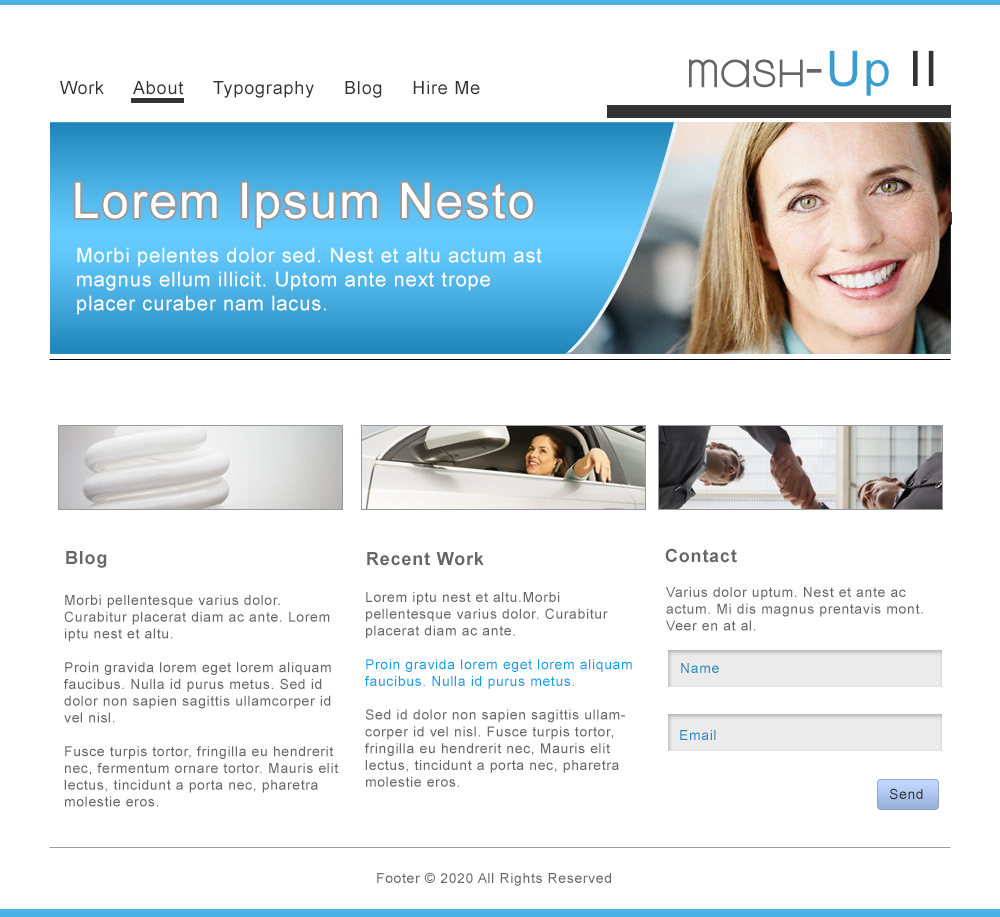
<style>
.page{position:relative;width:1000px;height:917px;background:#ffffff}
.page>*{position:absolute;margin:0}
.t1{font:49px "KravitzThermal";letter-spacing:0.045em;color:#666666}
.t2{font:49px "Geneva";letter-spacing:0.045em;color:#666666}
.t3{font:49px "ArialMT";letter-spacing:0.045em;color:#389ed1}
.t4{font:49px "ArialMT";letter-spacing:0.045em;color:#333333}
.t5{font:18px "ArialMT";letter-spacing:0.045em;color:#333333}
.t6{font:49px "ArialMT";letter-spacing:0.045em;color:#ffffff}
.t7{font:20px "ArialMT";letter-spacing:0.045em;color:#ffffff}
.t8{font:18px "Arial-BoldMT";letter-spacing:0.045em;color:#666666}
.t9{font:14px "ArialMT";letter-spacing:0.045em;color:#666666}
.t10{font:14px "ArialMT";letter-spacing:0.045em;color:#0da0e9}
.t11{font:14px "ArialMT";letter-spacing:0.045em;color:#258bbe}
.t12{font:14px "ArialMT";letter-spacing:0.045em;color:#333333}
</style>
<div class="page">
<p class="t1" style="left:689px;top:50px;width:245px;height:46px">Mash<span class="t2">-</span><span class="t3">Up</span><span class="t4"> II</span></p>
<p class="t5" style="left:60px;top:81px;width:420px;height:17px">Work     About     Typography     Blog     Hire Me</p>
<p class="t6" style="left:75px;top:182px;width:458px;height:46px">Lorem Ipsum Nesto</p>
<p class="t7" style="left:77px;top:247px;width:465px;height:68px">Morbi pelentes dolor sed. Nest et altu actum ast magnus ellum illicit. Uptom ante next trope placer curaber nam lacus.</p>
<p class="t8" style="left:66px;top:551px;width:41px;height:17px">Blog</p>
<p class="t8" style="left:367px;top:552px;width:117px;height:14px">Recent Work</p>
<p class="t8" style="left:665px;top:548px;width:72px;height:15px">Contact</p>
<p class="t9" style="left:365px;top:592px;width:267px;height:195px">Lorem iptu nest et altu.Morbi <br>pellentesque varius dolor. Curabitur placerat diam ac ante.<br><br><span class="t10">Proin gravida lorem eget lorem aliquam faucibus. Nulla id purus metus. <br></span><br>Sed id dolor non sapien sagittis ullamcorper id vel nisl. Fusce turpis tortor, fringilla eu hendrerit nec, Mauris elit lectus, tincidunt a porta nec, pharetra molestie eros.</p>
<p class="t9" style="left:666px;top:587px;width:257px;height:44px">Varius dolor uptum. Nest et ante ac actum. Mi dis magnus prentavis mont.<br>Veer en at al.</p>
<p class="t9" style="left:64px;top:595px;width:275px;height:212px">Morbi pellentesque varius dolor. <br>Curabitur placerat diam ac ante. Lorem<br>iptu nest et altu.<br><br>Proin gravida lorem eget lorem aliquam faucibus. Nulla id purus metus. Sed id dolor non sapien sagittis ullamcorper id vel nisl. <br><br>Fusce turpis tortor, fringilla eu hendrerit nec, fermentum ornare tortor. Mauris elit lectus, tincidunt a porta nec, pharetra molestie eros.</p>
<p class="t11" style="left:681px;top:663px;width:38px;height:10px">Name</p>
<p class="t11" style="left:680px;top:730px;width:36px;height:10px">Email</p>
<p class="t12" style="left:889px;top:788px;width:34px;height:12px">Send</p>
<p class="t9" style="left:377px;top:872px;width:234px;height:14px">Footer © 2020 All Rights Reserved</p>
</div>
